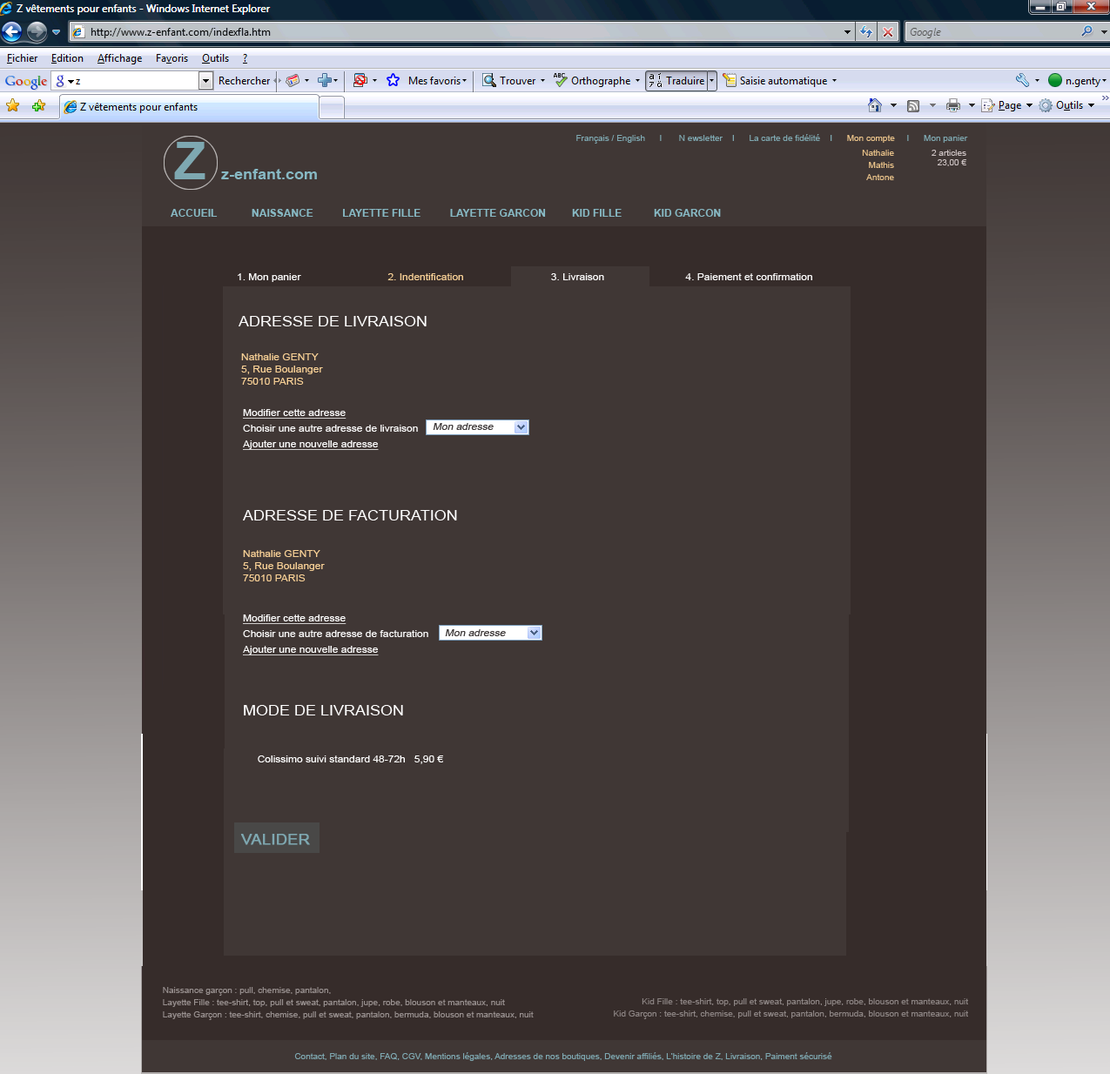
<style>
.page{position:relative;width:1110px;height:1074px;background:#403735}
.page>*{position:absolute;margin:0}
.t1{font:9.4px "ArialMT";color:#ffffff;scale:1.11 1}
.t2{font:9.4px "ArialMT";color:#f9d196;scale:1.11 1}
.t3{font:14.1px "ArialMT";color:#ffffff;scale:1.11 1}
.t4{font:9.4px/12.2px "ArialMT";color:#f9d196;scale:1.11 1}
.t5{font:9.4px/15.7px "ArialMT";color:#ffffff;text-decoration:underline;scale:1.11 1}
.t6{font:9.4px/15.7px "ArialMT";color:#ffffff;scale:1.11 1}
.t7{font:14.1px/12.2px "ArialMT";color:#ffffff;scale:1.11 1}
.t8{font:14.1px/15.7px "ArialMT";color:#ffffff;scale:1.11 1}
.t9{font:9.4px "ArialMT";color:#3e3939;font-style:italic;scale:1.11 1}
.t10{font:14.1px "ArialMT";color:#7ea8b1;font-weight:bold;scale:1.11 1}
</style>
<div class="page">
<p class="t1" style="left:238px;top:273px;width:574px;height:9px">1. Mon panier                             <span class="t2"> 2. Indentification</span>                              3. Livraison                            4. Paiement et confirmation</p>
<p class="t3" style="left:239px;top:316px;width:188px;height:10px">ADRESSE DE LIVRAISON</p>
<p class="t4" style="left:241px;top:353px;width:82px;height:32px">Nathalie GENTY<br>5, Rue Boulanger<br>75010 PARIS</p>
<p class="t4" style="left:243px;top:409px;width:214px;height:355px"><span class="t5">Modifier cette adresse<br></span><span class="t6">Choisir une autre adresse de livraison<br></span><span class="t5">Ajouter une nouvelle adresse<br><br><br><br></span><span class="t7"><br><br>ADRESSE DE FACTURATION<br><br><br></span>Nathalie GENTY<br>5, Rue Boulanger<br>75010 PARIS<br><br><br><span class="t5">Modifier cette adresse<br></span><span class="t6">Choisir une autre adresse de facturation<br></span><span class="t5">Ajouter une nouvelle adresse<br><br><br><br></span><span class="t8">MODE DE LIVRAISON<br><br><br></span><span class="t6">     Colissimo suivi standard 48-72h   5,90 €</span></p>
<p class="t9" style="left:433px;top:423px;width:61px;height:7px">Mon adresse</p>
<p class="t9" style="left:445px;top:629px;width:61px;height:7px">Mon adresse</p>
<p class="t10" style="left:240px;top:834px;width:70px;height:11px">VALIDER</p>
</div>
